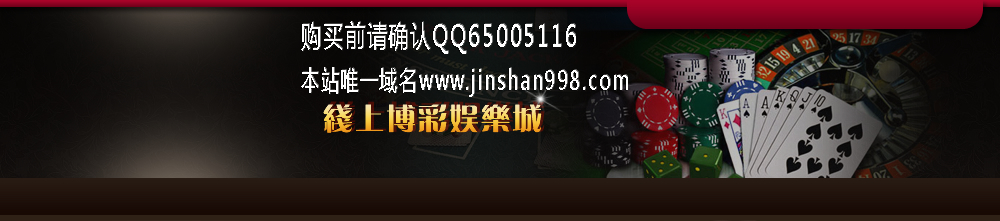
<style>
.page{position:relative;width:1000px;height:221px}
.page>*{position:absolute;margin:0}
.t1{font:30.3px "MicrosoftYaHei";letter-spacing:0.1em;color:#ffffff;scale:0.65 1}
.t2{font:27.2px "MicrosoftYaHei";letter-spacing:0.1em;color:#ffffff;scale:0.65 1}
</style>
<div class="page">
<p class="t1" style="left:301px;top:21px;width:275px;height:33px">购买前请确认QQ65005116</p>
<p class="t2" style="left:301px;top:67px;width:327px;height:30px">本站唯一域名www.jinshan998.com</p>
</div>
